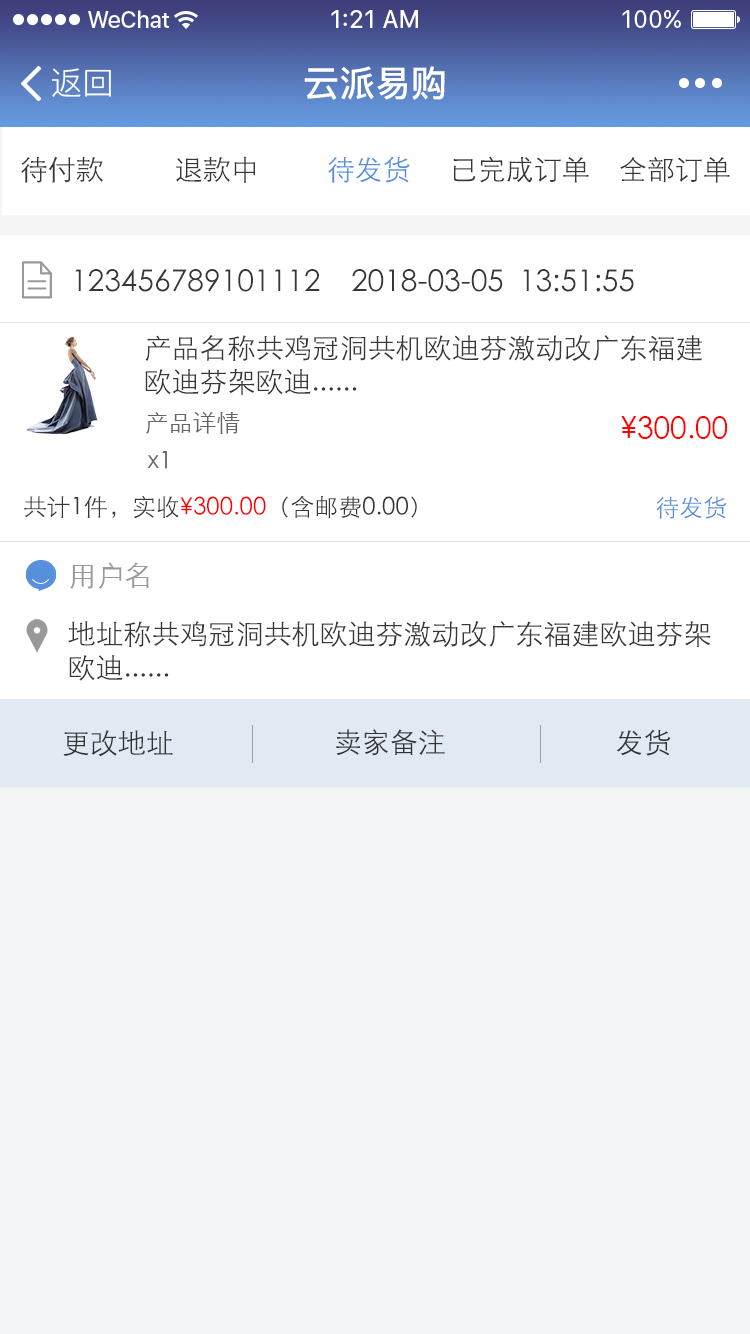
<style>
.page{position:relative;width:750px;height:1334px;background:#f4f5f6}
.page>*{position:absolute;margin:0}
.t1{font:32px "PingFang-SC-Regular";color:#ffffff}
.t2{font:36px "PingFang-SC-Bold";color:#ffffff}
.t3{font:28px "STXihei";color:#373737}
.t4{font:28px "STXihei";color:#568fdc}
.t5{font:30px "STXihei";color:#373737}
.t6{font:24px "STXihei";color:#666666}
.t7{font:30px "STXihei";color:#ff0000}
.t8{font:24px "STXihei";color:#373737}
.t9{font:24px "STXihei";color:#ff0000}
.t10{font:24px "STXihei";color:#568fdc}
.t11{font:28px "STXihei";color:#999999}
.t12{font:28px "STXihei";color:#333333}
</style>
<div class="page">
<p class="t1" style="left:52px;top:68px;width:59px;height:29px">返回</p>
<p class="t2" style="left:304px;top:66px;width:141px;height:34px">云派易购</p>
<p class="t3" style="left:21px;top:156px;width:82px;height:27px">待付款</p>
<p class="t3" style="left:176px;top:156px;width:80px;height:27px">退款中</p>
<p class="t4" style="left:328px;top:156px;width:82px;height:27px">待发货</p>
<p class="t3" style="left:453px;top:156px;width:136px;height:27px">已完成订单</p>
<p class="t3" style="left:620px;top:157px;width:110px;height:26px">全部订单</p>
<p class="t5" style="left:75px;top:269px;width:245px;height:23px">123456789101112</p>
<p class="t5" style="left:352px;top:269px;width:282px;height:23px">2018-03-05  13:51:55</p>
<p class="t3" style="left:145px;top:335px;width:557px;height:60px">产品名称共鸡冠洞共机欧迪芬激动改广东福建欧迪芬架欧迪......</p>
<p class="t6" style="left:146px;top:412px;width:94px;height:22px">产品详情</p>
<p class="t7" style="left:621px;top:416px;width:107px;height:23px">¥300.00</p>
<p class="t6" style="left:147px;top:451px;width:20px;height:18px">x1</p>
<p class="t8" style="left:24px;top:495px;width:393px;height:24px">共计1件，实收<span class="t9">¥300.00</span>（含邮费0.00）</p>
<p class="t10" style="left:656px;top:496px;width:71px;height:23px">待发货</p>
<p class="t11" style="left:70px;top:562px;width:79px;height:27px">用户名</p>
<p class="t3" style="left:68px;top:621px;width:643px;height:60px">地址称共鸡冠洞共机欧迪芬激动改广东福建欧迪芬架欧迪......</p>
<p class="t12" style="left:63px;top:730px;width:110px;height:27px">更改地址</p>
<p class="t12" style="left:336px;top:729px;width:109px;height:27px">卖家备注</p>
<p class="t12" style="left:616px;top:729px;width:55px;height:27px">发货</p>
</div>
